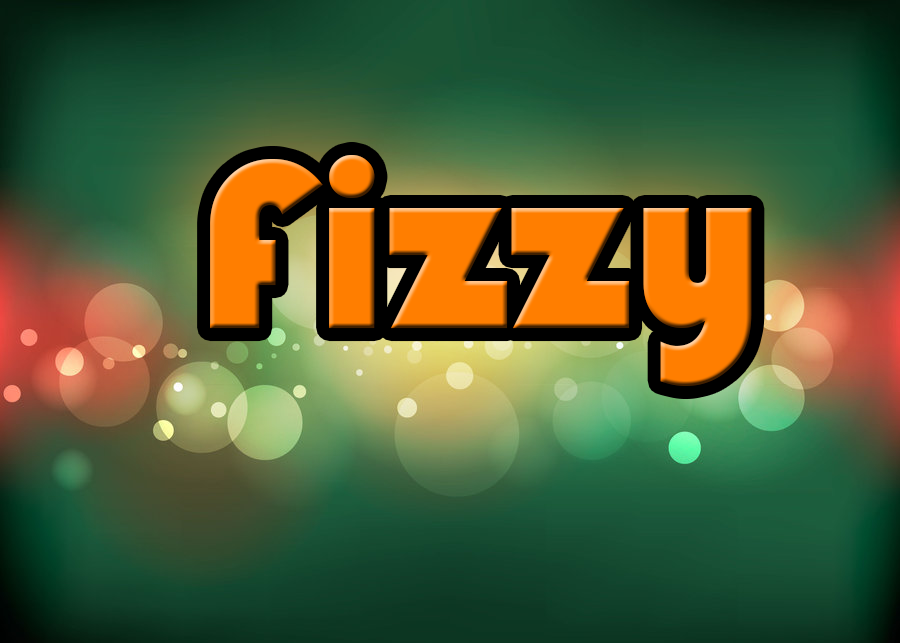
<style>
.page{position:relative;width:900px;height:643px}
.page>*{position:absolute;margin:0}
.t1{font:247px "Bauhaus93";color:#ff7e00}
</style>
<div class="page">
<p class="t1" style="left:210px;top:155px;width:542px;height:231px">Fizzy</p>
</div>
